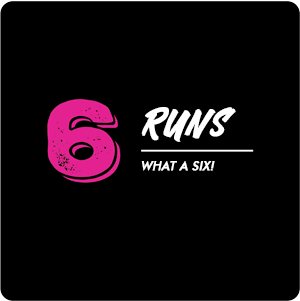
<style>
.page{position:relative;width:300px;height:301px;background:#000000}
.page>*{position:absolute;margin:0}
.t1{font:30.5px "RIVERHACK-Regular";letter-spacing:0.1em;color:#ffffff;text-transform:uppercase;font-weight:bold;font-style:italic}
.t2{font:12px "FuturaBT-Medium";color:#ffffff;text-transform:uppercase;font-weight:bold;font-style:italic}
</style>
<div class="page">
<p class="t1" style="left:141px;top:107px;width:95px;height:35px">rUNS</p>
<p class="t2" style="left:141px;top:161px;width:74px;height:10px">WHAT A SIX!</p>
</div>
